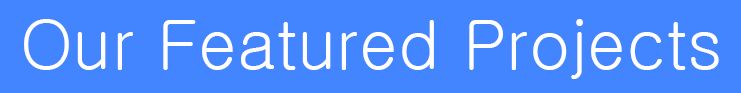
<style>
.page{position:relative;width:741px;height:93px;background:#4385ff}
.page>*{position:absolute;margin:0}
.t1{font:68.7px "Gulim";color:#ffffff}
</style>
<div class="page">
<p class="t1" style="left:24px;top:19px;width:695px;height:60px">Our Featured Projects</p>
</div>
